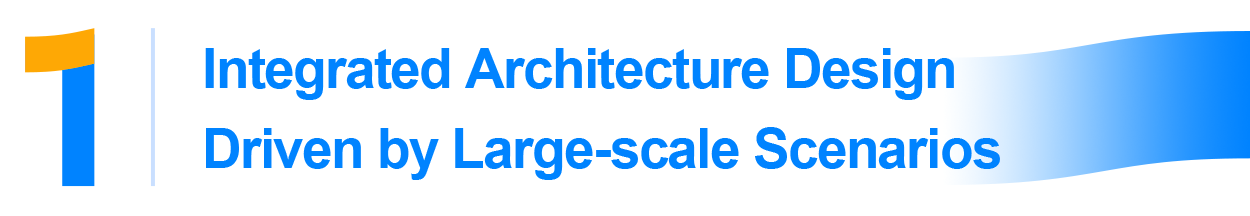
<style>
.page{position:relative;width:1250px;height:216px;background:#ffffff}
.page>*{position:absolute;margin:0}
.t1{font:55px/80px "Arial-BoldMT";letter-spacing:-0.03em;color:#0083ff}
</style>
<div class="page">
<p class="t1" style="left:205px;top:48px;width:795px;height:132px">Integrated Architecture Design<br>Driven by Large-scale Scenarios</p>
</div>
